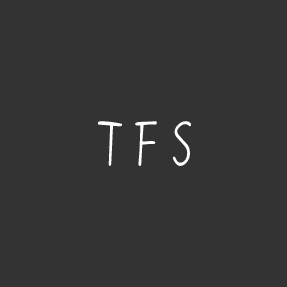
<style>
.page{position:relative;width:287px;height:287px;background:#333333}
.page>*{position:absolute;margin:0}
.t1{font:72px "DFHsiu-W3-WIN-BF";color:#ffffff}
</style>
<div class="page">
<p class="t1" style="left:98px;top:121px;width:93px;height:45px">TFS</p>
</div>
